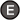
<style>
.page{position:relative;width:20px;height:20px;background:#54504f}
.page>*{position:absolute;margin:0}
.t1{font:13px "ArialMT";color:#ffffff}
</style>
<div class="page">
<p class="t1" style="left:7px;top:5px;width:7px;height:10px">E</p>
</div>
